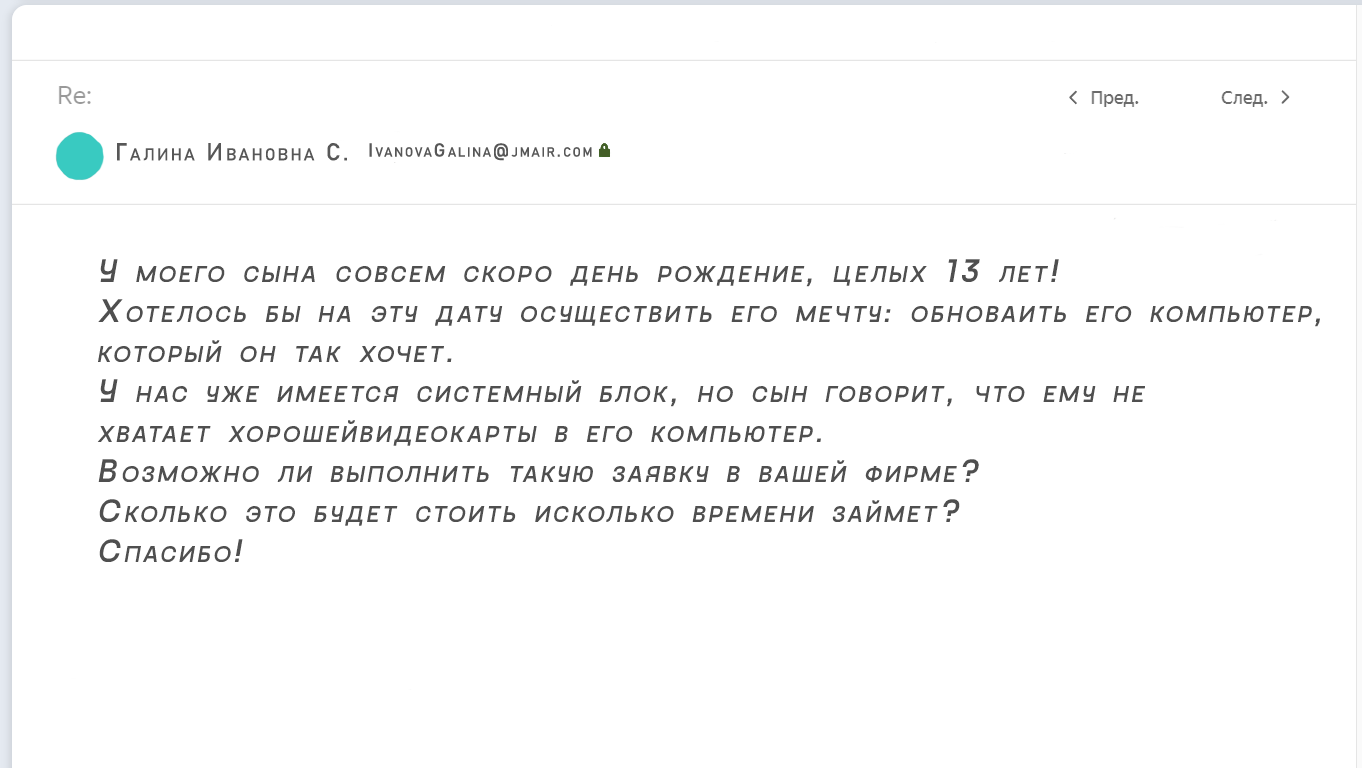
<style>
.page{position:relative;width:1362px;height:768px;background:#ffffff}
.page>*{position:absolute;margin:0}
.t1{font:33.3px "GoshaSans-Regular";letter-spacing:0.12em;color:#4f4f4f;font-variant:small-caps;font-style:italic}
</style>
<div class="page">
<p class="t1" style="left:97px;top:259px;width:1223px;height:303px">У моего сына совсем скоро день рождение, целых 13 лет!<br>Хотелось бы на эту дату осуществить его мечту: обноваить его компьютер, <br>который он так хочет.<br>У нас уже имеется системный блок, но сын говорит, что ему не <br>хватает хорошейвидеокарты в его компьютер.<br>Возможно ли выполнить такую заявку в вашей фирме? <br>Сколько это будет стоить исколько времени займет?<br>Спасибо!</p>
</div>
